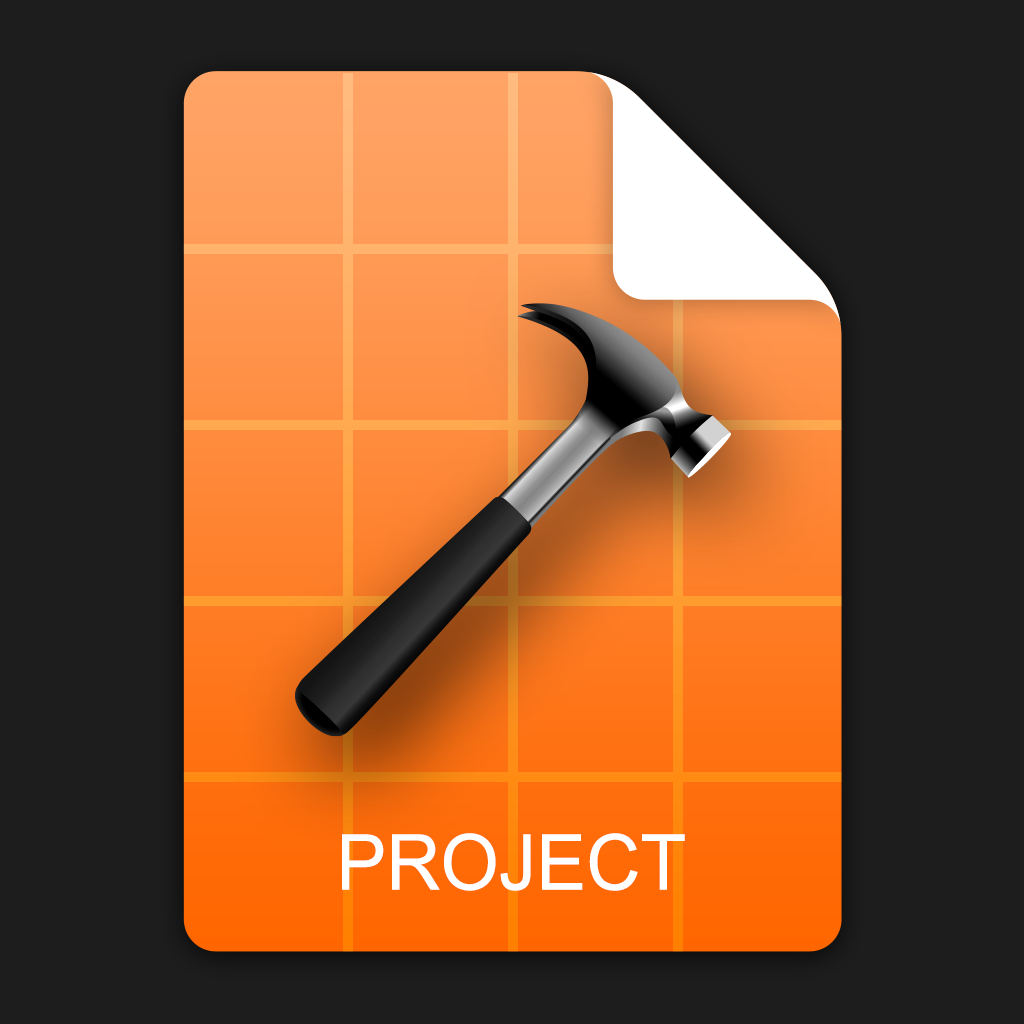
<style>
.page{position:relative;width:1024px;height:1024px;background:#1d1d1d}
.page>*{position:absolute;margin:0}
.t1{font:77.3px "ArialMT";color:#ffffff}
</style>
<div class="page">
<p class="t1" style="left:342px;top:833px;width:343px;height:58px">PROJECT</p>
</div>
